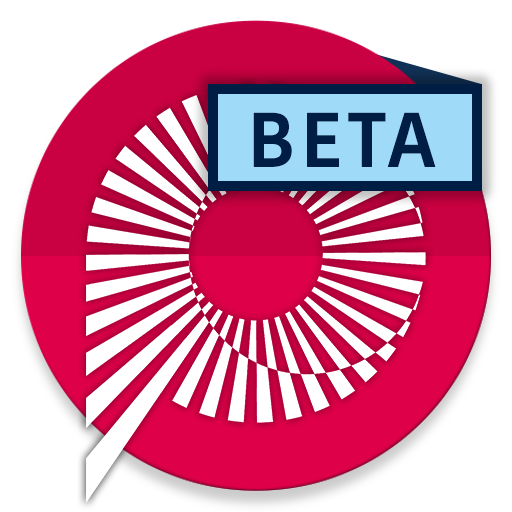
<style>
.page{position:relative;width:512px;height:512px;background:#ffffff}
.page>*{position:absolute;margin:0}
.t1{font:76.2px "KohinoorDevanagari-Semibold";letter-spacing:0.04em;color:#001e44;font-weight:bold}
</style>
<div class="page">
<p class="t1" style="left:253px;top:112px;width:183px;height:55px">BETA</p>
</div>
